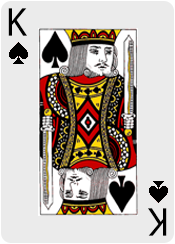
<style>
.page{position:relative;width:175px;height:244px;background:#ebebeb}
.page>*{position:absolute;margin:0}
.t1{font:36px "KozGoPr6N-Regular";color:#000000}
</style>
<div class="page">
<p class="t1" style="left:8px;top:8px;width:19px;height:28px">K</p>
<p class="t1" style="left:148px;top:208px;width:19px;height:28px;rotate:180deg">K</p>
</div>
